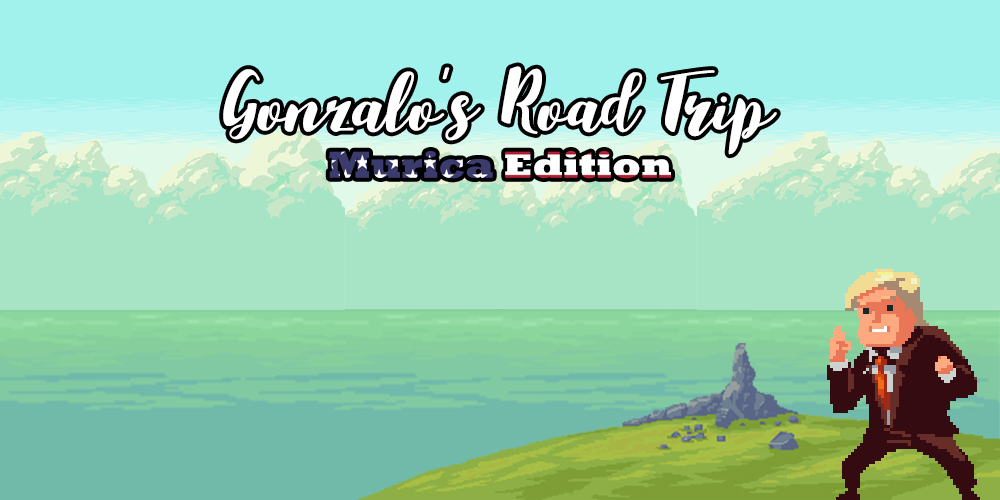
<style>
.page{position:relative;width:1000px;height:500px}
.page>*{position:absolute;margin:0}
.t1{font:26.1px "Aldine-Regular";color:#ffffff}
.t2{font:38.5px "Rockwell-ExtraBold"}
</style>
<div class="page">
<p class="t1" style="left:223px;top:66px;width:554px;height:89px;text-align:center">Gonzalo’s Road Trip</p>
<p class="t2" style="left:329px;top:151px;width:342px;height:28px">Murica Edition</p>
</div>
